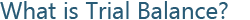
<style>
.page{position:relative;width:250px;height:20px;background:#ffffff}
.page>*{position:absolute;margin:0}
.t1{font:24px "SegoeUI";color:#285b76}
</style>
<div class="page">
<p class="t1" style="left:0px;top:1px;width:228px;height:18px">What is Trial Balance?</p>
</div>
